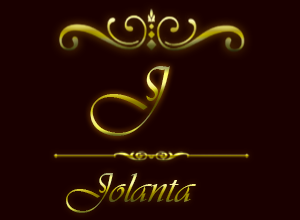
<style>
.page{position:relative;width:300px;height:220px;background:#1a0000}
.page>*{position:absolute;margin:0}
.t1{font:75.8px "Vivaldii"}
.t2{font:44.2px "Vivaldii"}
</style>
<div class="page">
<p class="t1" style="left:90px;top:66px;width:80px;height:70px">J</p>
<p class="t2" style="left:66px;top:173px;width:130px;height:40px">Jolanta</p>
</div>
